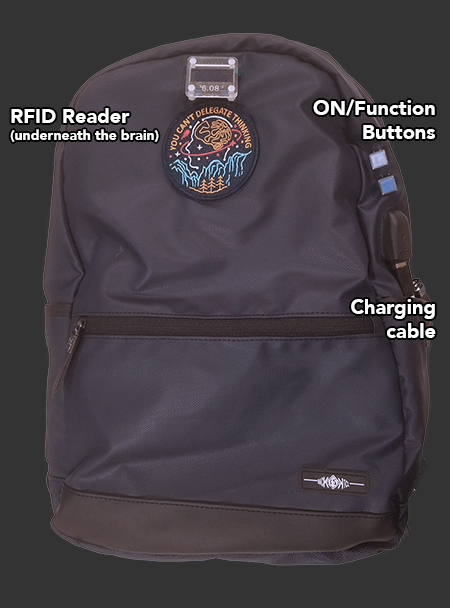
<style>
.page{position:relative;width:450px;height:608px;background:#333333}
.page>*{position:absolute;margin:0}
.t1{font:20px "Avenir-Black";color:#ffffff}
.t2{font:14px "Avenir-Black";color:#ffffff}
</style>
<div class="page">
<p class="t1" style="left:313px;top:99px;width:122px;height:40px;text-align:right">ON/Function <br>Buttons</p>
<p class="t2" style="left:10px;top:108px;width:149px;height:34px"><span class="t1">RFID Reader<br></span>(underneath the brain)</p>
<p class="t1" style="left:351px;top:299px;width:85px;height:39px;text-align:right">Charging cable</p>
</div>
